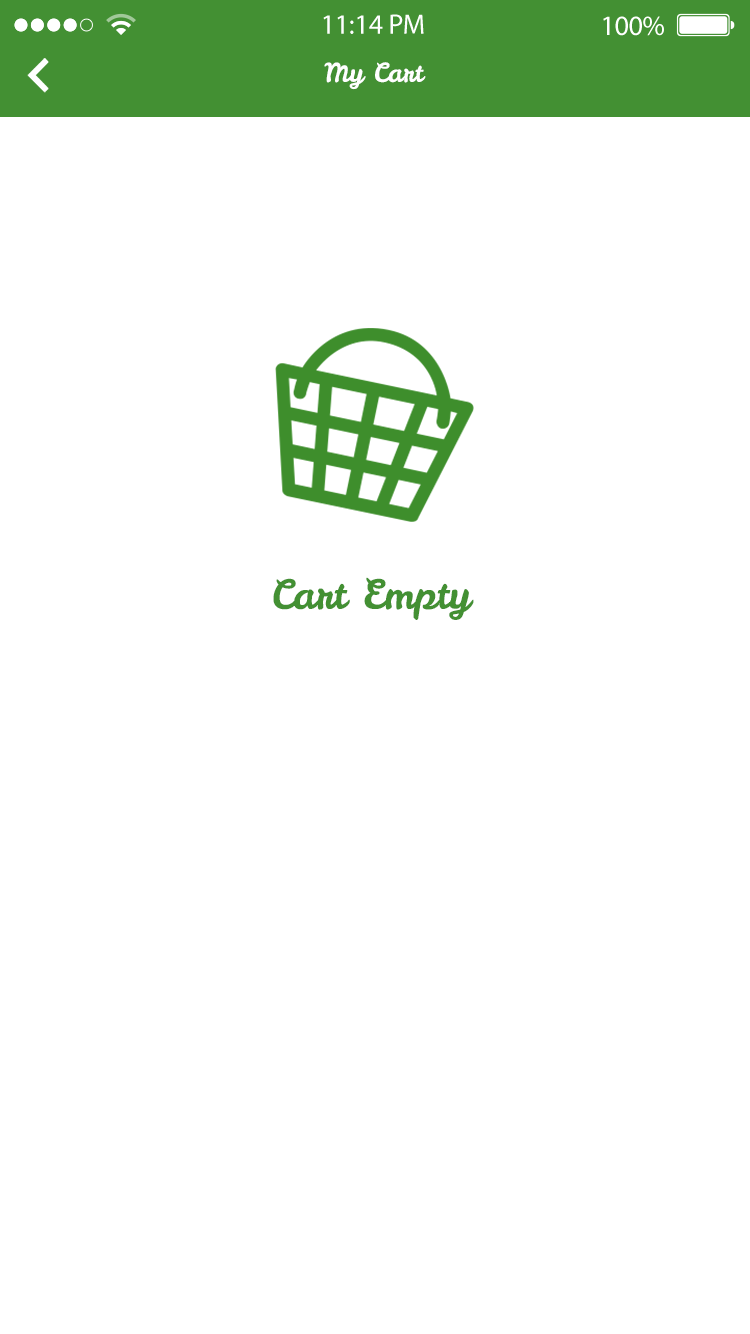
<style>
.page{position:relative;width:750px;height:1334px;background:#ffffff}
.page>*{position:absolute;margin:0}
.t1{font:26px "LeckerliOne-Regular";color:#ffffff}
.t2{font:40px "LeckerliOne-Regular";color:#439033}
</style>
<div class="page">
<p class="t1" style="left:324px;top:62px;width:102px;height:28px">My Cart</p>
<p class="t2" style="left:273px;top:577px;width:201px;height:43px">Cart Empty</p>
</div>
